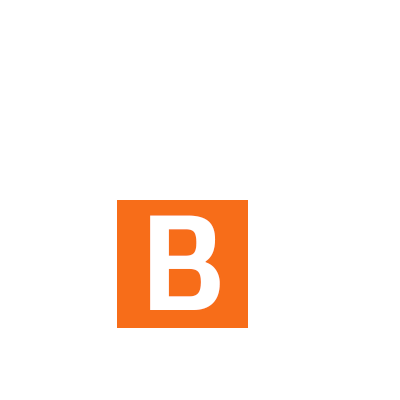
<style>
.page{position:relative;width:400px;height:400px;background:#ffffff}
.page>*{position:absolute;margin:0}
.t1{font:151px "Changa-Medium";color:#ffffff}
</style>
<div class="page">
<p class="t1" style="left:150px;top:215px;width:70px;height:95px">B</p>
</div>
